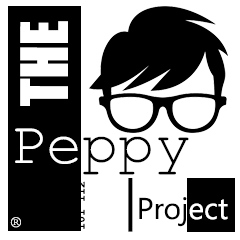
<style>
.page{position:relative;width:240px;height:240px;background:#ffffff}
.page>*{position:absolute;margin:0}
.t1{font:60px "Impact";color:#ffffff}
.t2{font:60px "Impact";color:#000000}
.t3{font:60px "CourierNewPSMT";color:#000000}
.t4{font:60px "CourierNewPSMT";color:#ffffff}
.t5{font:60px "CourierNewPSMT";color:#fdfdfd}
.t6{font:11.7px "CourierNewPS-BoldMT";color:#000000}
.t7{font:30px "SegoeUIHistoric";color:#000000}
.t8{font:53.3px "SegoeUIHistoric";color:#000000}
.t9{font:30px "SegoeUIHistoric";color:#ffffff}
.t10{font:16.7px "CourierNewPSMT";color:#fefefe}
</style>
<div class="page">
<p class="t1" style="left:20px;top:21px;width:48px;height:85px;rotate:-90deg"><span class="t2">          </span>THE</p>
<p class="t3" style="left:15px;top:128px;width:174px;height:47px"><span class="t4">P</span><span class="t5">e</span>ppy</p>
<p class="t6" style="left:77px;top:181px;width:8px;height:48px;rotate:-90deg">101 112</p>
<p class="t7" style="left:128px;top:178px;width:100px;height:54px"><span class="t8">|</span>Proj<span class="t9">ect</span></p>
<p class="t10" style="left:10px;top:217px;width:11px;height:11px">®</p>
</div>
